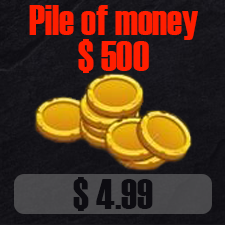
<style>
.page{position:relative;width:225px;height:225px}
.page>*{position:absolute;margin:0}
.t1{font:41.7px "Haettenschweiler";color:#ff1e00}
.t2{font:41.7px "Haettenschweiler";color:#0d0c11}
</style>
<div class="page">
<p class="t1" style="left:29px;top:5px;width:169px;height:35px">Pile of money</p>
<p class="t1" style="left:78px;top:39px;width:71px;height:34px">$ 500</p>
<p class="t2" style="left:73px;top:177px;width:80px;height:34px">$ 4.99</p>
</div>
